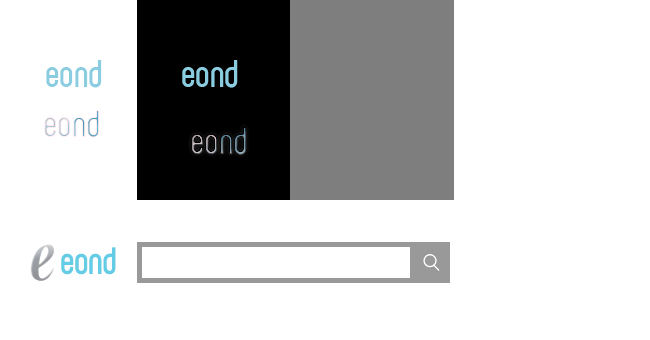
<style>
.page{position:relative;width:650px;height:340px;background:#ffffff}
.page>*{position:absolute;margin:0}
.t1{font:36px "071MKSD-01Medium";color:#8acde0}
.t2{font:36px "071MKSD-01Medium"}
.t3{font:36px "071MKSD-01Medium";letter-spacing:-0.01em;color:#64cce5}
</style>
<div class="page">
<p class="t1" style="left:46px;top:60px;width:56px;height:28px">eond</p>
<p class="t1" style="left:182px;top:60px;width:56px;height:28px">eond</p>
<p class="t2" style="left:44px;top:110px;width:56px;height:28px">eond</p>
<p class="t2" style="left:191px;top:127px;width:56px;height:28px">eond</p>
<p class="t2" style="left:191px;top:127px;width:56px;height:28px">eond</p>
<p class="t3" style="left:61px;top:247px;width:55px;height:28px">eond</p>
</div>
